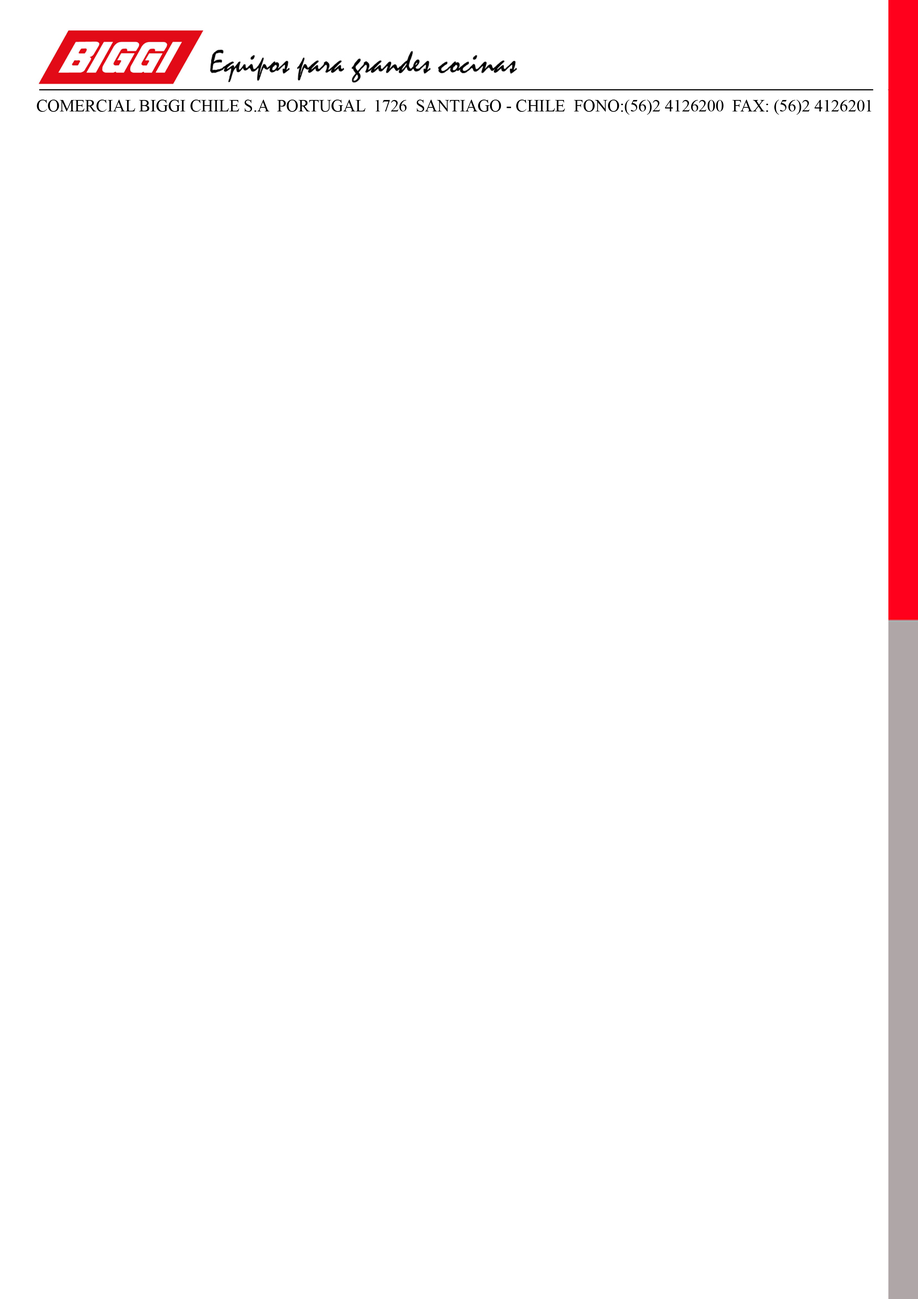
<style>
.page{position:relative;width:918px;height:1299px;background:#ffffff}
.page>*{position:absolute;margin:0}
.t1{font:16.8px "TimesNewRomanPSMT";color:#000000}
</style>
<div class="page">
<p class="t1" style="left:37px;top:100px;width:835px;height:15px">COMERCIAL BIGGI CHILE S.A  PORTUGAL  1726  SANTIAGO - CHILE  FONO:(56)2 4126200  FAX: (56)2 4126201</p>
</div>
